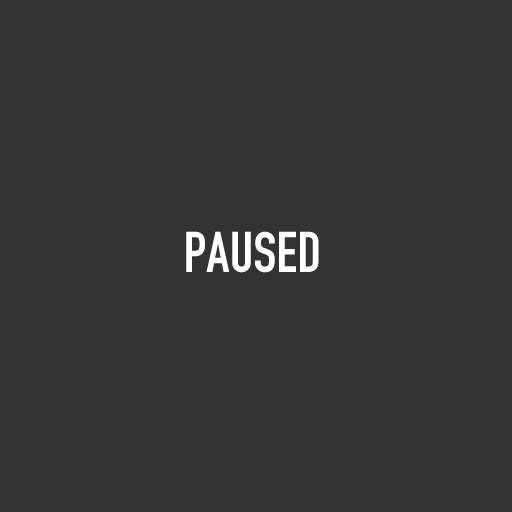
<style>
.page{position:relative;width:512px;height:512px;background:#333333}
.page>*{position:absolute;margin:0}
.t1{font:56.4px "DINEngschrift";color:#ffffff}
</style>
<div class="page">
<p class="t1" style="left:186px;top:231px;width:133px;height:42px">PAUSED</p>
</div>
